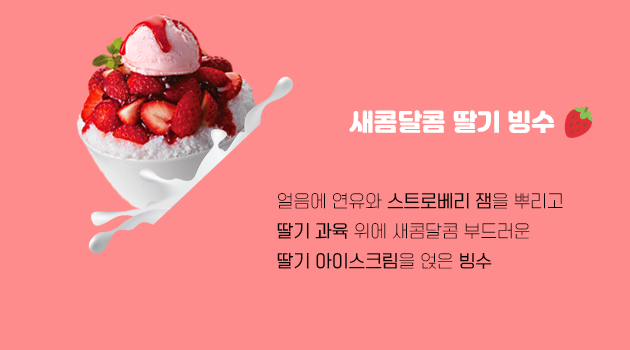
<style>
.page{position:relative;width:630px;height:350px;background:#ff8c8c}
.page>*{position:absolute;margin:0}
.t1{font:24px "Jalnan";color:#ffffff}
.t2{font:17px/30px "TTOmniGothicT";color:#000000}
.t3{font:17px/30px "TTOmniGothicM";color:#000000}
</style>
<div class="page">
<p class="t1" style="left:349px;top:110px;width:206px;height:23px">새콤달콤 딸기 빙수</p>
<p class="t2" style="left:277px;top:192px;width:286px;height:77px">얼음에 연유와 <span class="t3">스트로베리 잼</span>을 뿌리고 <br><span class="t3">딸기 과육</span> 위에 새콤달콤 부드러운 <br><span class="t3">딸기 아이스크림</span>을 얹은 <span class="t3">빙수</span></p>
</div>
